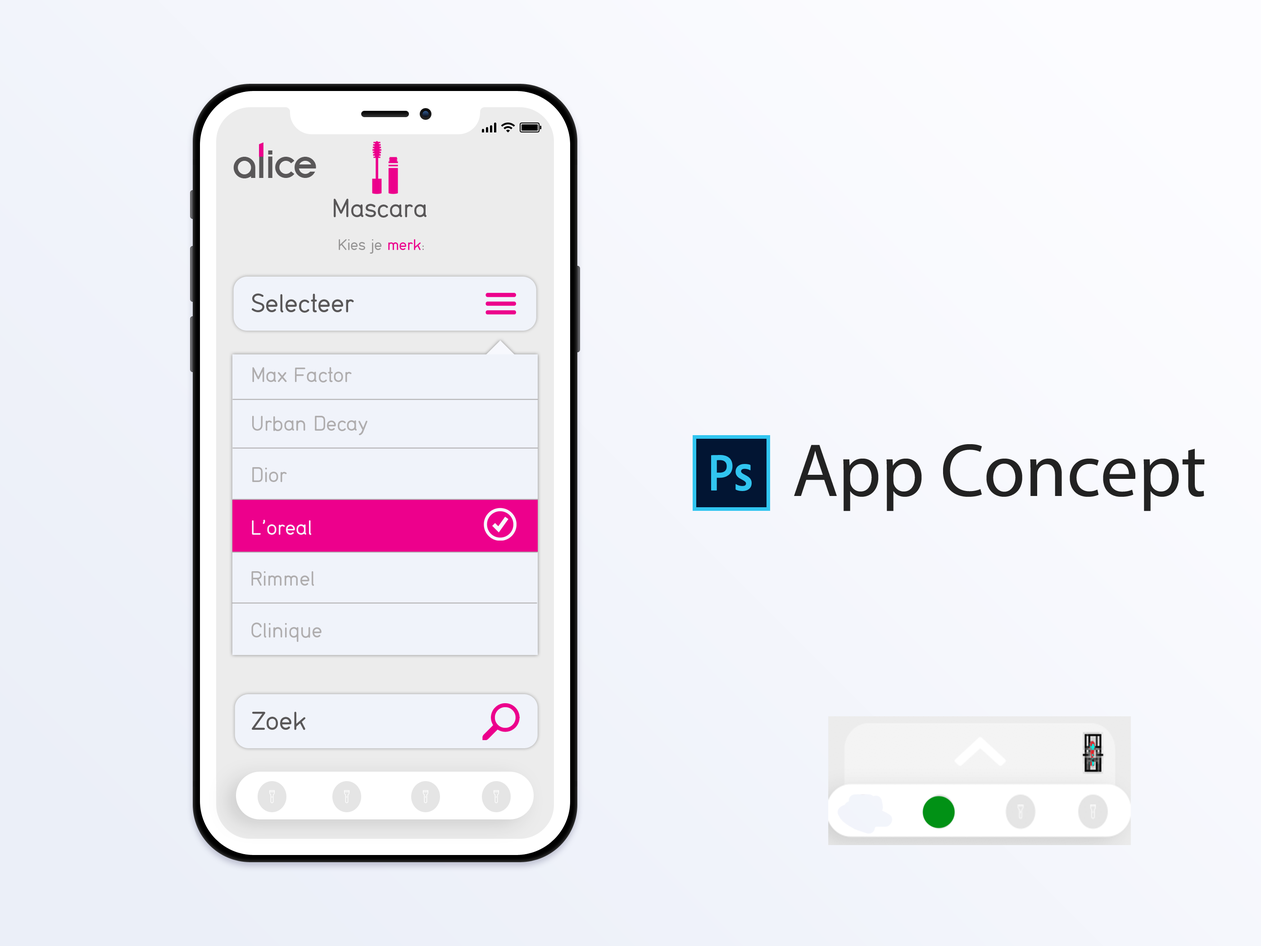
<style>
.page{position:relative;width:1261px;height:946px}
.page>*{position:absolute;margin:0}
.t1{font:40.7px "AquaGrotesque";letter-spacing:-0.075em;color:#595758}
.t2{font:40.7px "AquaGrotesque";letter-spacing:-0.1em;color:#595758}
.t3{font:40.7px "AquaGrotesque";letter-spacing:-0.15em;color:#595758}
.t4{font:27px "Din16-Normal";letter-spacing:0.01em;color:#595758}
.t5{font:16.2px "Din16-Normal";letter-spacing:0.01em;color:#959494}
.t6{font:16.2px "Din16-Normal";letter-spacing:0.01em;color:#ec008c}
.t7{font:21.6px "Din16-Normal";letter-spacing:0.01em;color:#afadae}
.t8{font:75.7px "MyriadPro-Regular";color:#222222}
.t9{font:21.6px "Din16-Normal";letter-spacing:0.01em;color:#f8f9fd}
</style>
<div class="page">
<p class="t1" style="left:233px;top:142px;width:83px;height:36px">al<span class="t2">i</span><span class="t3">ce</span></p>
<p class="t4" style="left:334px;top:199px;width:92px;height:19px">Mascara</p>
<p class="t5" style="left:339px;top:239px;width:85px;height:15px">Kies je <span class="t6">merk</span>:</p>
<p class="t4" style="left:252px;top:293px;width:102px;height:20px">Selecteer</p>
<p class="t7" style="left:252px;top:367px;width:100px;height:15px">Max Factor</p>
<p class="t7" style="left:252px;top:416px;width:115px;height:19px">Urban Decay</p>
<p class="t8" style="left:794px;top:444px;width:411px;height:67px">App Concept</p>
<p class="t7" style="left:252px;top:467px;width:35px;height:15px">Dior</p>
<p class="t9" style="left:252px;top:519px;width:60px;height:16px">L’oreal</p>
<p class="t7" style="left:251px;top:571px;width:63px;height:15px">Rimmel</p>
<p class="t7" style="left:251px;top:622px;width:71px;height:20px">Clinique</p>
<p class="t4" style="left:252px;top:712px;width:53px;height:18px">Zoek</p>
</div>
